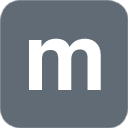
<style>
.page{position:relative;width:128px;height:128px;background:#616b75}
.page>*{position:absolute;margin:0}
.t1{font:93.9px "Helvetica-Bold";color:#ffffff}
</style>
<div class="page">
<p class="t1" style="left:29px;top:38px;width:72px;height:52px">m</p>
</div>
